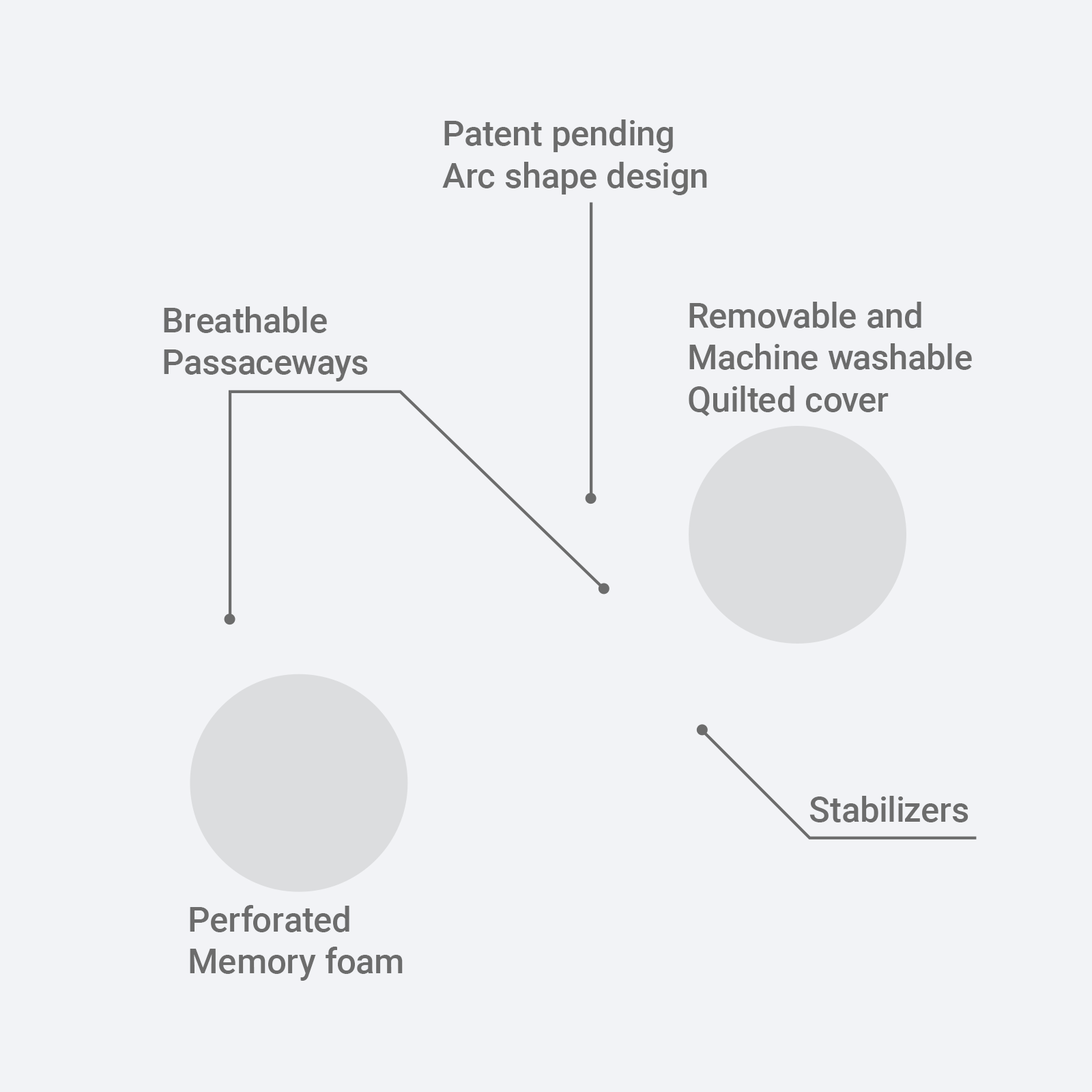
<style>
.page{position:relative;width:1092px;height:1092px;background:#f2f3f6}
.page>*{position:absolute;margin:0}
.t1{font:34.9px "Roboto-Medium";color:#6c6c6c}
</style>
<div class="page">
<p class="t1" style="left:442px;top:119px;width:265px;height:76px">Patent pending<br>Arc shape design</p>
<p class="t1" style="left:689px;top:302px;width:283px;height:114px">Removable and<br>Machine washable<br>Quilted cover</p>
<p class="t1" style="left:164px;top:306px;width:204px;height:76px">Breathable<br>Passaceways</p>
<p class="t1" style="left:809px;top:796px;width:159px;height:26px">Stabilizers</p>
<p class="t1" style="left:190px;top:905px;width:213px;height:76px">Perforated<br>Memory foam</p>
</div>
